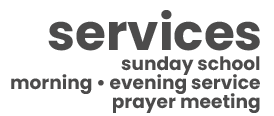
<style>
.page{position:relative;width:274px;height:116px;background:#ffffff}
.page>*{position:absolute;margin:0}
.t1{font:50px "Poppins-Bold";color:#4c4b4b}
.t2{font:18.6px "Poppins-Bold";color:#4c4b4b}
</style>
<div class="page">
<p class="t1" style="left:48px;top:10px;width:212px;height:41px">services</p>
<p class="t2" style="left:121px;top:56px;width:139px;height:19px">sunday school</p>
<p class="t2" style="left:11px;top:74px;width:249px;height:20px">morning • evening service</p>
<p class="t2" style="left:113px;top:93px;width:147px;height:20px">prayer meeting</p>
</div>
